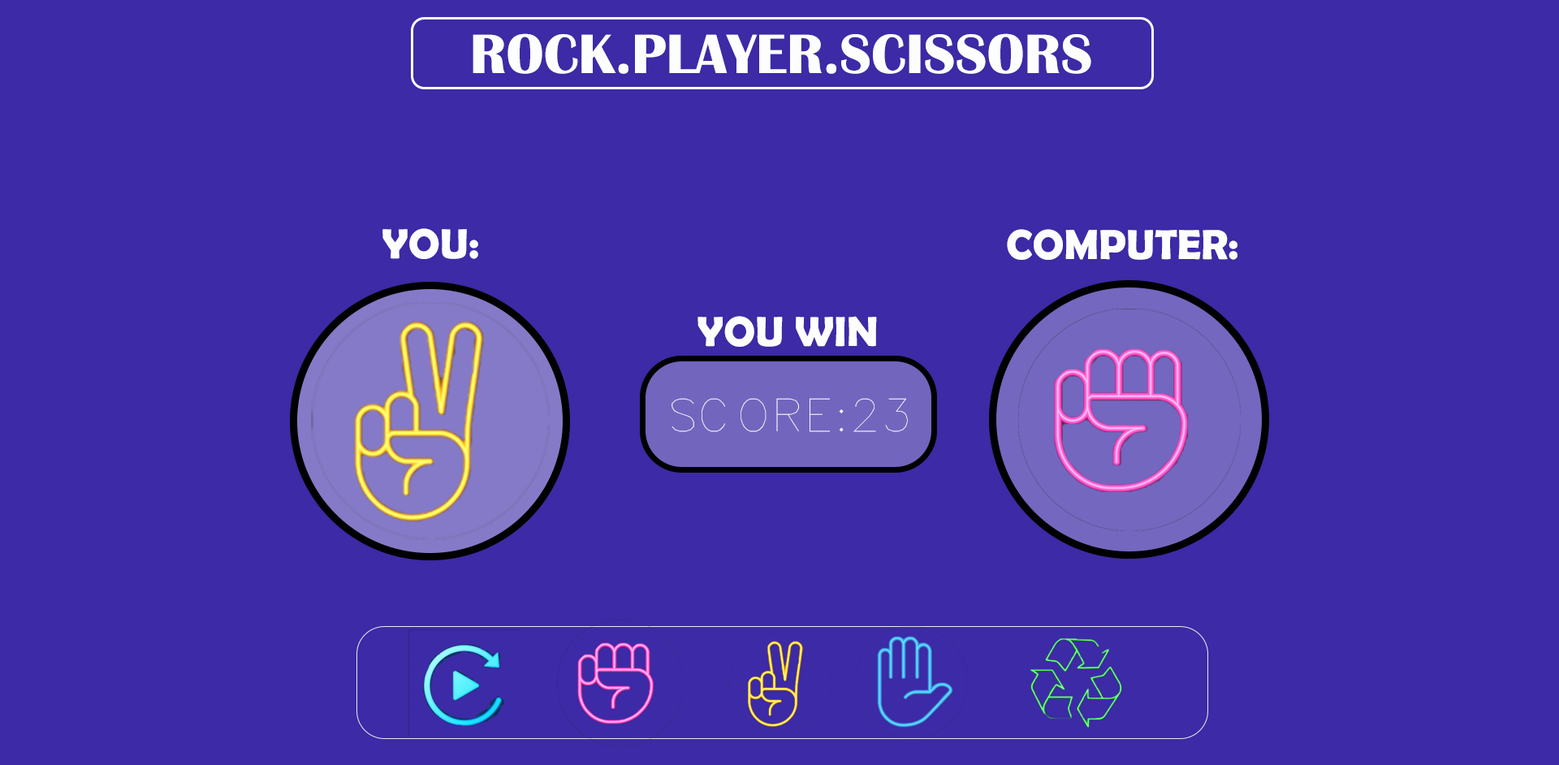
<style>
.page{position:relative;width:1559px;height:765px;background:#3c2aa6}
.page>*{position:absolute;margin:0}
.t1{font:57.6px "BritannicBold";color:#fdfdfd;text-transform:uppercase}
.t2{font:42.2px "BerlinSansFBDemi-Bold";color:#fdfdfd;text-transform:uppercase}
.t3{font:43.8px "AMGDT";color:#fdfdfd;text-transform:uppercase}
</style>
<div class="page">
<p class="t1" style="left:473px;top:33px;width:618px;height:41px">ROCK.PLAYER.SCISSORS</p>
<p class="t2" style="left:382px;top:228px;width:96px;height:31px">YOU:</p>
<p class="t2" style="left:1007px;top:229px;width:230px;height:31px">COMPUTER:</p>
<p class="t2" style="left:697px;top:316px;width:180px;height:31px">YOU WIN</p>
<p class="t3" style="left:672px;top:398px;width:236px;height:34px">SCORE:23</p>
</div>
